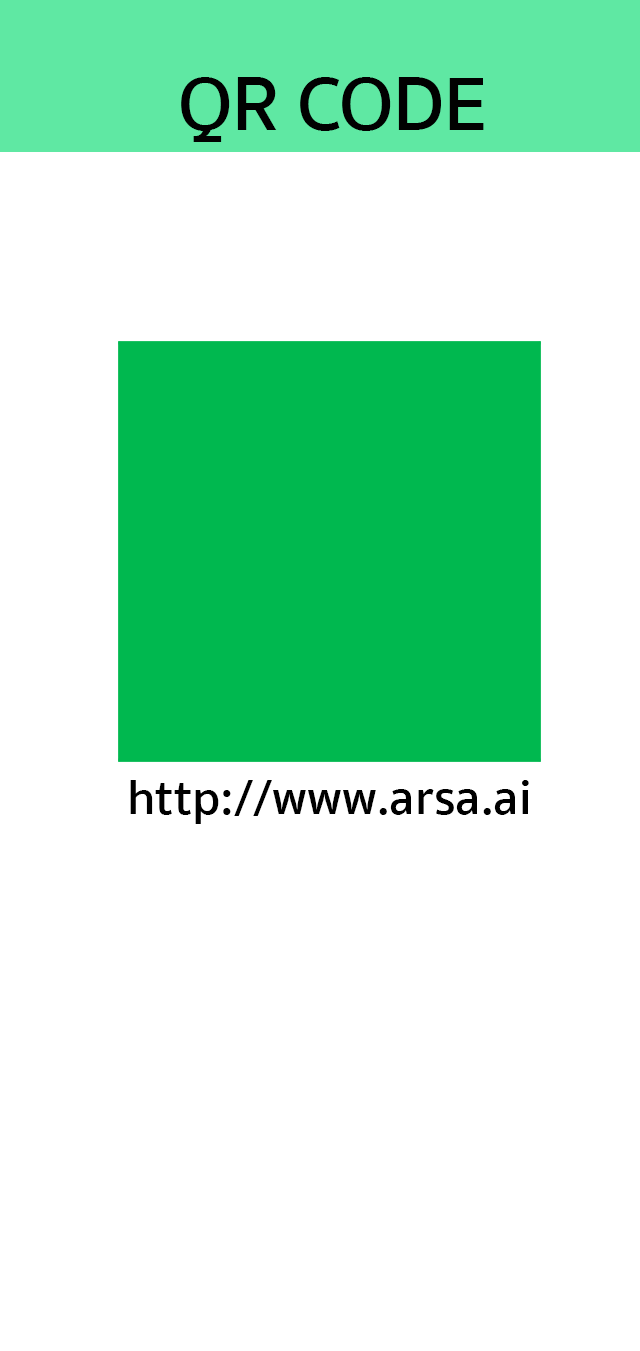
<style>
.page{position:relative;width:640px;height:1351px;background:#ffffff}
.page>*{position:absolute;margin:0}
.t1{font:77.7px "SukhumvitSet-SemiBold";color:#010101}
.t2{font:50px "SukhumvitSet-SemiBold";color:#000000}
</style>
<div class="page">
<p class="t1" style="left:181px;top:77px;width:303px;height:65px">QR CODE</p>
<p class="t2" style="left:130px;top:780px;width:399px;height:44px">http://www.arsa.ai</p>
</div>
